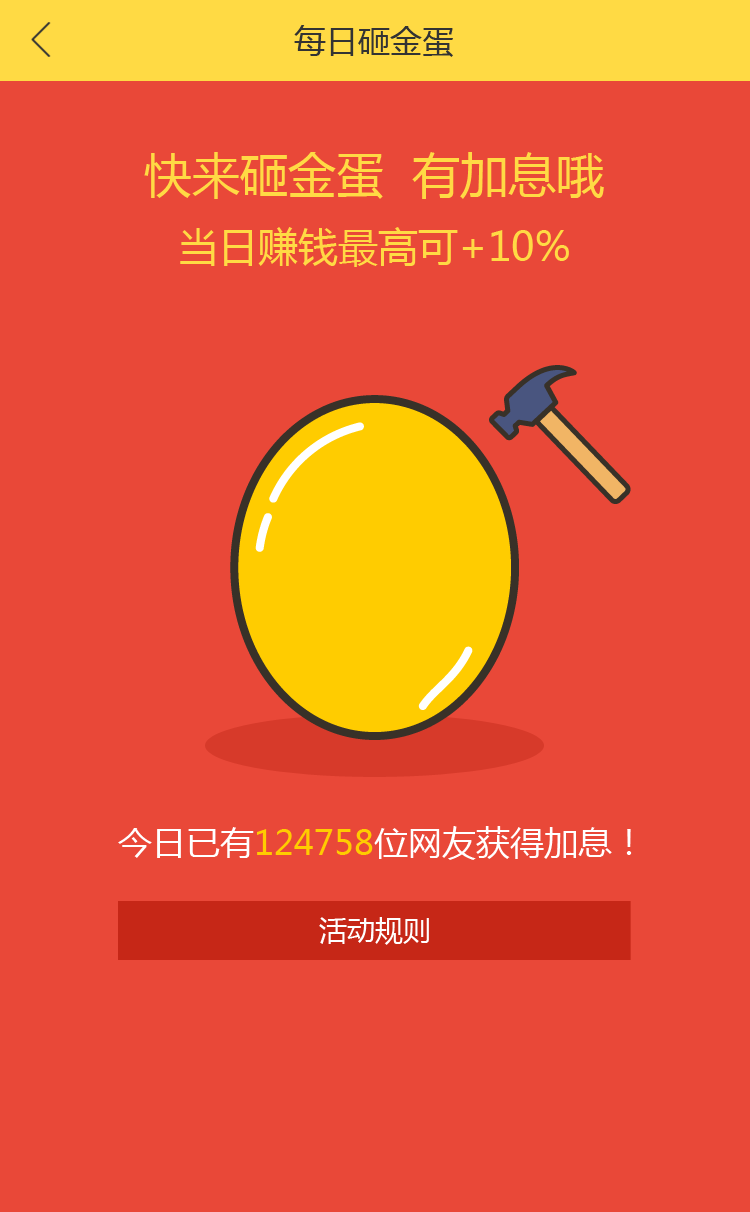
<style>
.page{position:relative;width:750px;height:1212px;background:#e94838}
.page>*{position:absolute;margin:0}
.t1{font:32px "MicrosoftYaHei";color:#333333}
.t2{font:48px "MicrosoftYaHei";color:#ffda44}
.t3{font:40px "MicrosoftYaHei";color:#ffda44}
.t4{font:34px "MicrosoftYaHei";color:#ffffff}
.t5{font:34px "MicrosoftYaHei";color:#ffcc00}
.t6{font:28px "MicrosoftYaHei";color:#ffffff}
</style>
<div class="page">
<p class="t1" style="left:294px;top:25px;width:159px;height:32px">每日砸金蛋</p>
<p class="t2" style="left:144px;top:152px;width:460px;height:47px">快来砸金蛋  有加息哦</p>
<p class="t3" style="left:180px;top:227px;width:389px;height:40px">当日赚钱最高可+10%</p>
<p class="t4" style="left:118px;top:826px;width:514px;height:34px">今日已有<span class="t5">124758</span>位网友获得加息！</p>
<p class="t6" style="left:319px;top:917px;width:110px;height:28px">活动规则</p>
</div>
